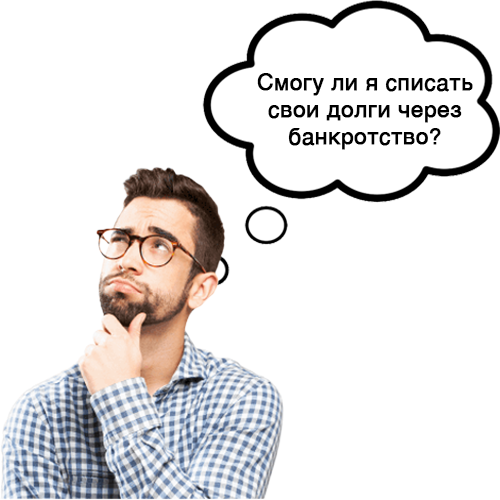
<style>
.page{position:relative;width:500px;height:500px;background:#ffffff}
.page>*{position:absolute;margin:0}
.t1{font:22.5px "Helvetica";color:#000000;font-weight:bold}
</style>
<div class="page">
<p class="t1" style="left:257px;top:73px;width:216px;height:77px;text-align:center">Смогу ли я списать<br>свои долги через<br>банкротство?</p>
</div>
